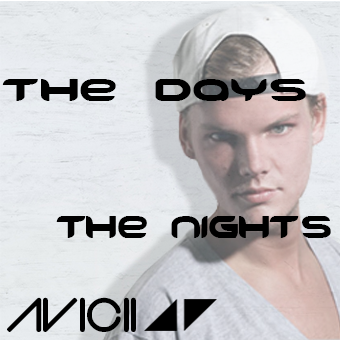
<style>
.page{position:relative;width:340px;height:340px}
.page>*{position:absolute;margin:0}
.t1{font:44px "FREEDOM";color:#000000;scale:1.24 1}
.t2{font:44px "FREEDOM";color:#000000}
.t3{font:50px "VerminVibes2Soft";color:#000000}
</style>
<div class="page">
<p class="t1" style="left:2px;top:79px;width:304px;height:22px">the days</p>
<p class="t2" style="left:56px;top:216px;width:275px;height:22px">The nights</p>
<p class="t3" style="left:7px;top:297px;width:129px;height:35px">Avicii</p>
</div>
